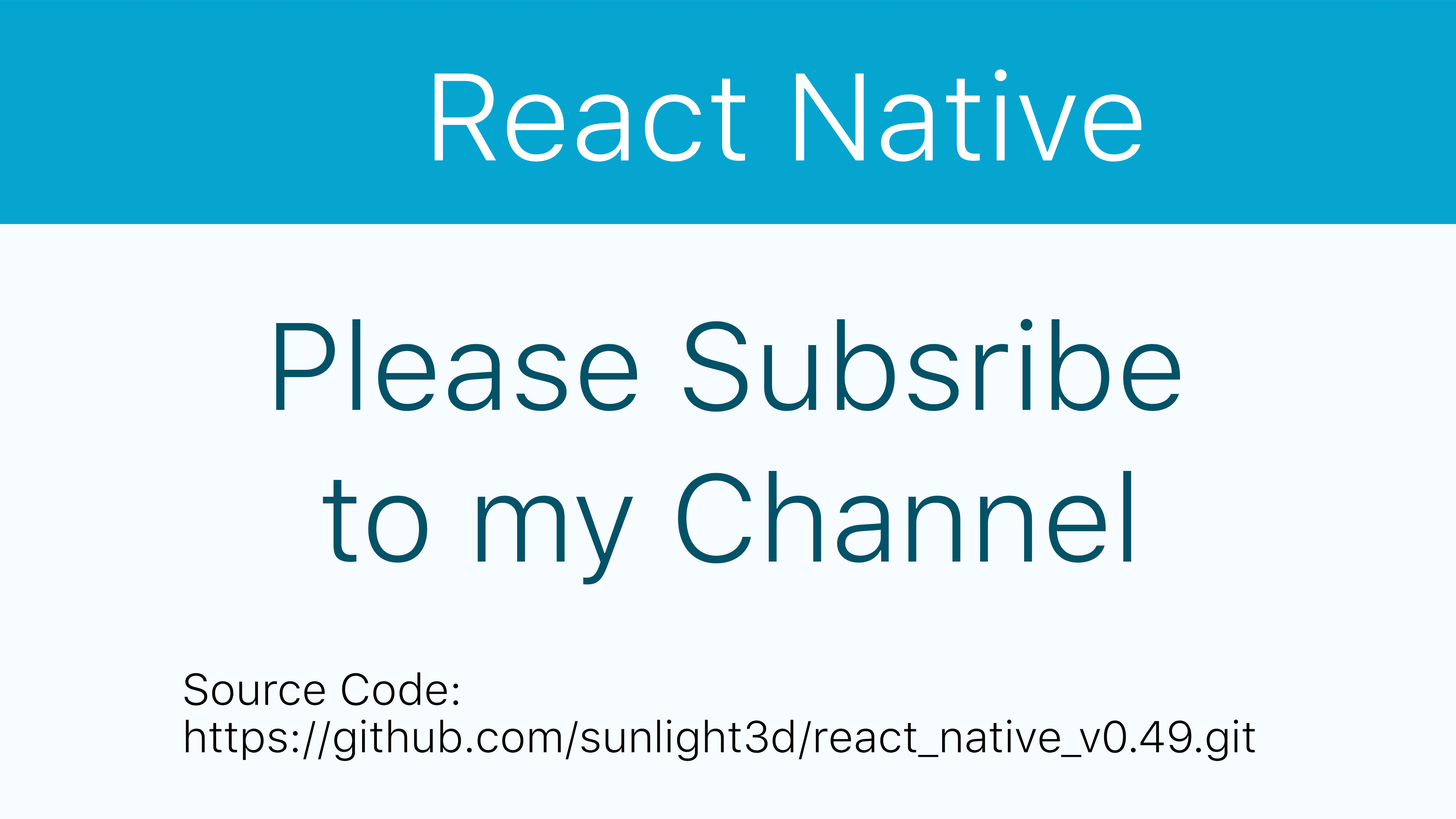
<style>
.page{position:relative;width:1456px;height:819px;background:#f6fcff}
.page>*{position:absolute;margin:0}
.t1{font:123.2px "SFUIText-Light";color:#ffffff}
.t2{font:123.2px/37.9px "SFUIText-Light";color:#025268}
.t3{font:44.2px/47.4px "SFUIText-Light";color:#000000}
</style>
<div class="page">
<p class="t1" style="left:435px;top:69px;width:707px;height:93px">React Native</p>
<p class="t2" style="left:276px;top:319px;width:904px;height:266px;text-align:center">Please Subsribe <br><br><br><br>to my Channel</p>
<p class="t3" style="left:184px;top:672px;width:1071px;height:89px">Source Code:<br>https://github.com/sunlight3d/react_native_v0.49.git</p>
</div>
